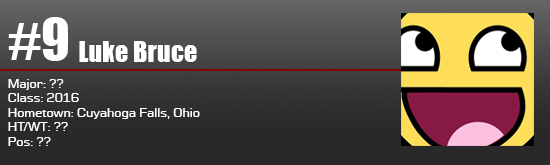
<style>
.page{position:relative;width:550px;height:165px}
.page>*{position:absolute;margin:0}
.t1{font:52.8px "Impact";color:#ffffff}
.t2{font:26.4px "Impact";color:#ffffff}
.t3{font:12px "Moire";color:#ffffff}
</style>
<div class="page">
<p class="t1" style="left:8px;top:17px;width:60px;height:44px">#9</p>
<p class="t2" style="left:79px;top:41px;width:118px;height:21px">Luke Bruce</p>
<p class="t3" style="left:8px;top:79px;width:192px;height:67px">Major: ??<br>Class: 2016<br>Hometown: Cuyahoga Falls, Ohio<br>HT/WT: ??<br>Pos: ??</p>
</div>
